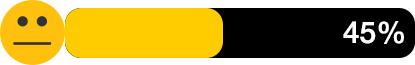
<style>
.page{position:relative;width:415px;height:65px;background:#000000}
.page>*{position:absolute;margin:0}
.t1{font:30px "HelveticaNeueCyr-Medium";color:#ffffff}
</style>
<div class="page">
<p class="t1" style="left:343px;top:21px;width:61px;height:23px">45%</p>
</div>
